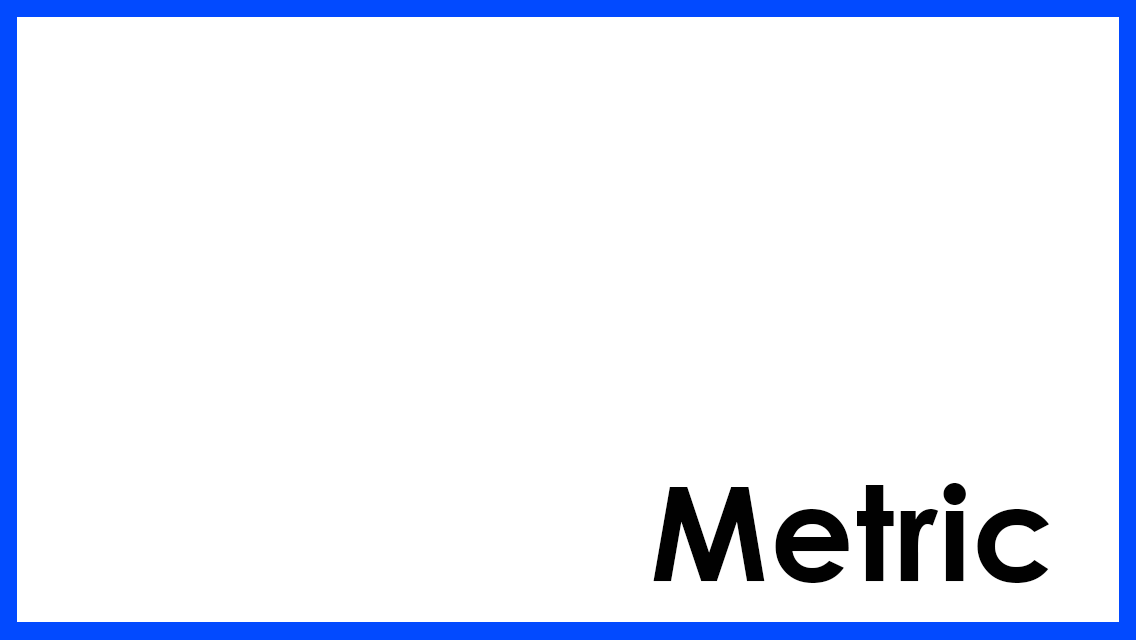
<style>
.page{position:relative;width:1136px;height:640px;background:#ffffff}
.page>*{position:absolute;margin:0}
.t1{font:131.5px "CenturyGothic-Bold";letter-spacing:0.01em;color:#010101}
</style>
<div class="page">
<p class="t1" style="left:653px;top:483px;width:396px;height:100px">Metric</p>
</div>
